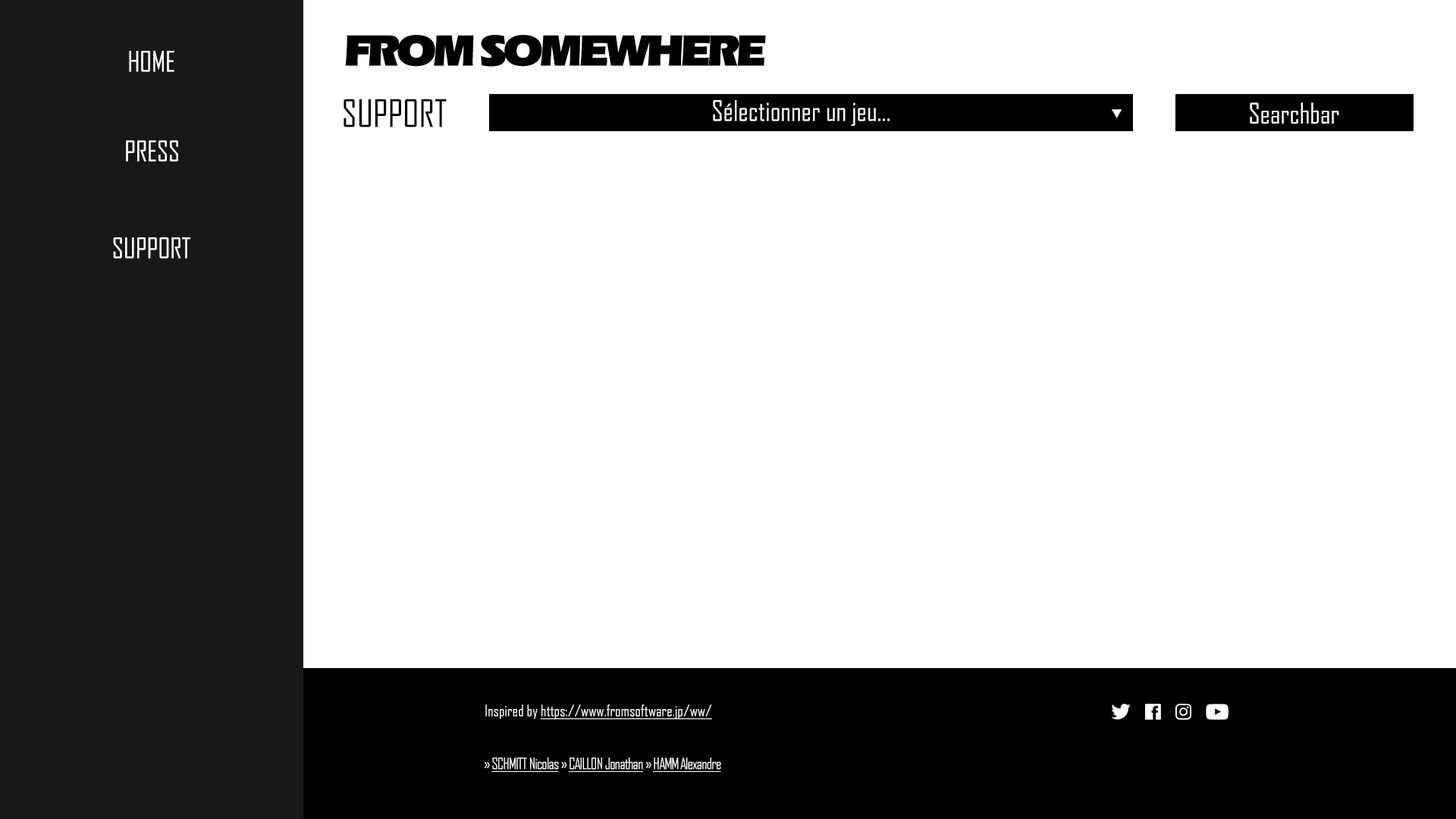
<style>
.page{position:relative;width:1456px;height:819px;background:#ffffff}
.page>*{position:absolute;margin:0}
.t1{font:45.5px "ErasITCbyBT-Ultra";letter-spacing:-0.075em;color:#000000}
.t2{font:27.3px "AgencyFB-Reg";color:#ffffff}
.t3{font:36.4px "AgencyFB-Reg";color:#000000}
.t4{font:15.2px "AgencyFB-Reg";color:#ffffff;text-decoration:underline}
.t5{font:15.2px "AgencyFB-Reg";color:#ffffff}
.t6{font:15.2px "AgencyFB-Reg";letter-spacing:-0.05em;color:#ffffff;text-decoration:underline}
.t7{font:15.2px "AgencyFB-Reg";letter-spacing:-0.05em;color:#ffffff}
</style>
<div class="page">
<p class="t1" style="left:345px;top:35px;width:129px;height:32px">FROM</p>
<p class="t1" style="left:481px;top:35px;width:285px;height:32px">SOMEWHERE</p>
<p class="t2" style="left:129px;top:51px;width:45px;height:21px">HOME</p>
<p class="t3" style="left:344px;top:99px;width:103px;height:28px">SUPPORT</p>
<p class="t2" style="left:713px;top:100px;width:177px;height:26px">Sélectionner un jeu...</p>
<p class="t2" style="left:1250px;top:102px;width:89px;height:22px">Searchbar</p>
<p class="t2" style="left:126px;top:140px;width:52px;height:22px">PRESS</p>
<p class="t2" style="left:113px;top:237px;width:77px;height:22px">SUPPORT</p>
<p class="t4" style="left:485px;top:704px;width:227px;height:16px"><span class="t5">Inspired by </span>https://www.fromsoftware.jp/ww/</p>
<p class="t6" style="left:484px;top:758px;width:237px;height:14px"><span class="t7">» </span>SCHMITT Nicolas<span class="t7"> » </span>CAILLON Jonathan<span class="t7"> » </span>HAMM Alexandre</p>
</div>
